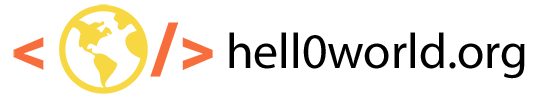
<style>
.page{position:relative;width:538px;height:100px;background:#ffffff}
.page>*{position:absolute;margin:0}
.t1{font:69.2px "Roboto-Bold";color:#f76d3c}
.t2{font:49.8px "MyriadPro-Regular";color:#000000}
</style>
<div class="page">
<p class="t1" style="left:13px;top:22px;width:200px;height:55px">&lt;      /&gt;</p>
<p class="t2" style="left:229px;top:32px;width:296px;height:47px">hell0world.org</p>
</div>
